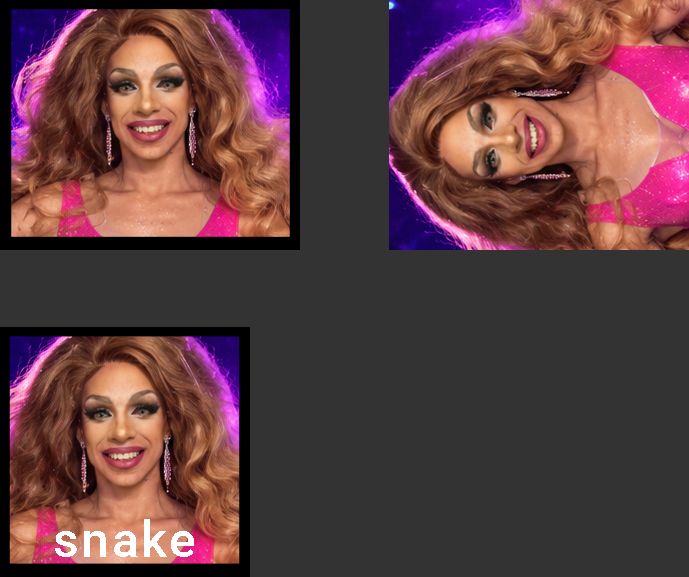
<style>
.page{position:relative;width:689px;height:577px;background:#333333}
.page>*{position:absolute;margin:0}
.t1{font:50px "Roboto-Medium";letter-spacing:0.05em;color:#ffffff}
</style>
<div class="page">
<p class="t1" style="left:55px;top:519px;width:139px;height:38px">snake</p>
</div>
